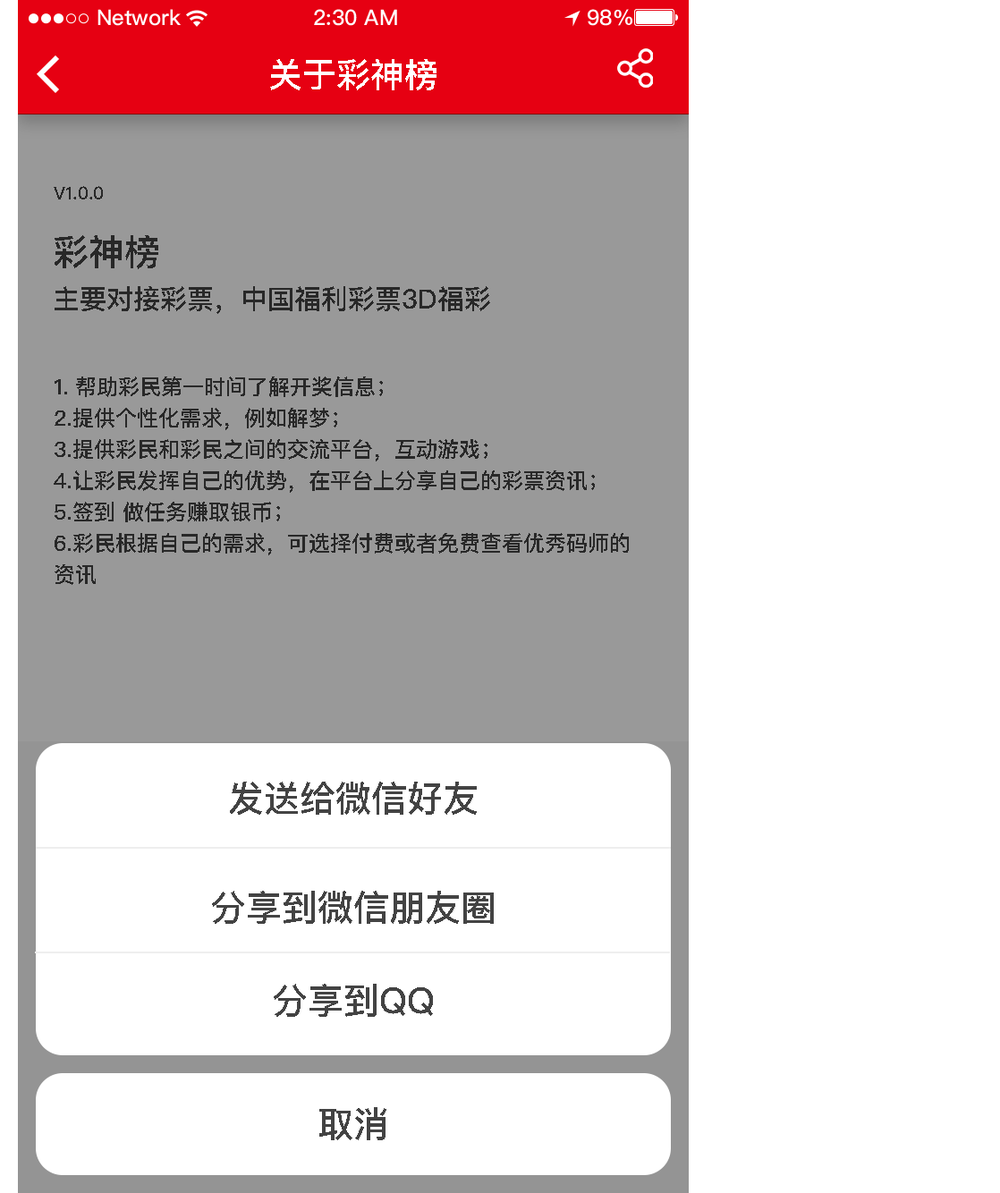
<style>
.page{position:relative;width:1000px;height:1193px;background:#ffffff}
.page>*{position:absolute;margin:0}
.t1{font:34px "PingFangSC-Medium";color:#ffffff;text-transform:uppercase}
.t2{font:17.9px "PingFangSC-Medium";color:#282828;text-transform:uppercase}
.t3{font:35.8px "PingFangSC-Medium";color:#282828;text-transform:uppercase}
.t4{font:26.8px "PingFangSC-Medium";color:#282828;text-transform:uppercase}
.t5{font:21.5px/31.3px "PingFangSC-Medium";color:#282828;text-transform:uppercase}
.t6{font:35.8px "PingFangSC-Medium";color:#434343;text-transform:uppercase}
</style>
<div class="page">
<p class="t1" style="left:270px;top:59px;width:166px;height:31px">关于彩神榜</p>
<p class="t2" style="left:54px;top:186px;width:49px;height:13px">v1.0.0</p>
<p class="t3" style="left:55px;top:235px;width:103px;height:34px">彩神榜</p>
<p class="t4" style="left:55px;top:286px;width:435px;height:28px">主要对接彩票，中国福利彩票3d福彩</p>
<p class="t5" style="left:54px;top:376px;width:575px;height:209px">1. 帮助彩民第一时间了解开奖信息；<br>2.提供个性化需求，例如解梦；<br>3.提供彩民和彩民之间的交流平台，互动游戏；<br>4.让彩民发挥自己的优势，在平台上分享自己的彩票资讯；<br>5.签到 做任务赚取银币；<br>6.彩民根据自己的需求，可选择付费或者免费查看优秀码师的 <br>资讯</p>
<p class="t6" style="left:230px;top:782px;width:247px;height:33px">发送给微信好友</p>
<p class="t6" style="left:212px;top:891px;width:282px;height:33px">分享到微信朋友圈</p>
<p class="t6" style="left:274px;top:984px;width:159px;height:33px">分享到qq</p>
<p class="t6" style="left:319px;top:1107px;width:67px;height:33px">取消</p>
</div>
